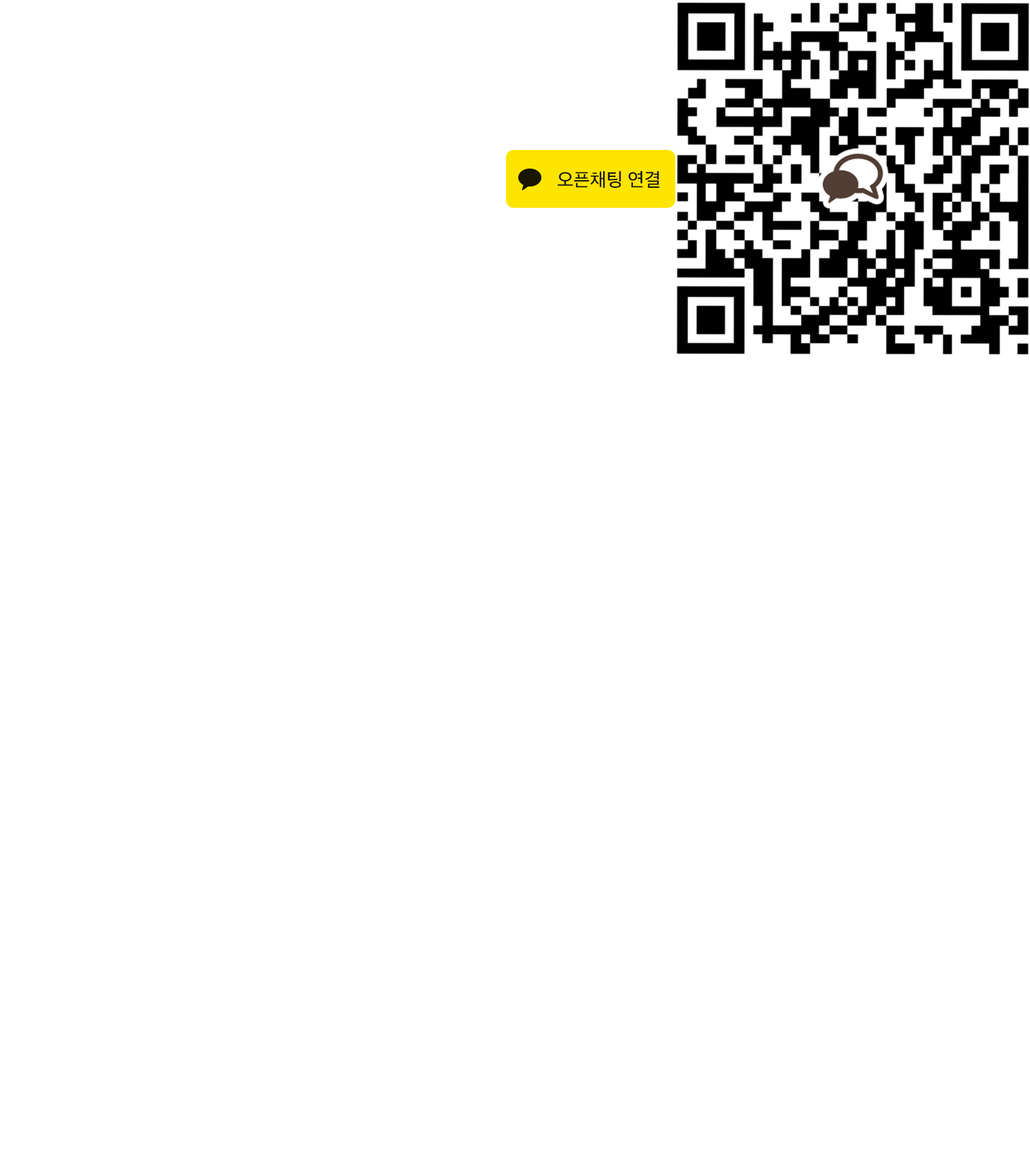
<style>
.page{position:relative;width:1030px;height:1158px;background:#ffffff}
.page>*{position:absolute;margin:0}
.t1{font:19.3px "AppleSDGothicNeo-Medium";letter-spacing:-0.01em;color:#191919}
</style>
<div class="page">
<p class="t1" style="left:557px;top:171px;width:103px;height:17px">오픈채팅 연결</p>
</div>
